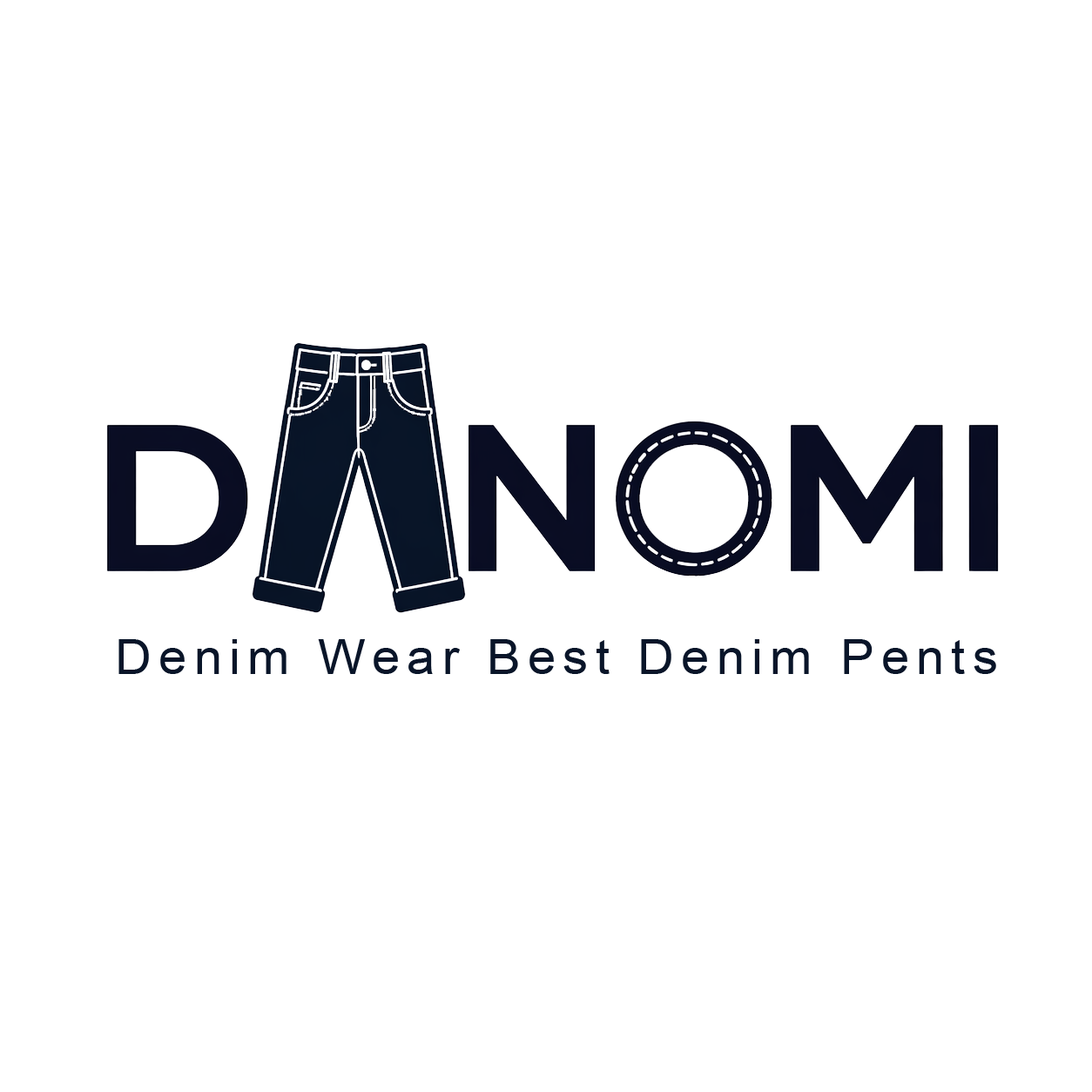
<style>
.page{position:relative;width:1092px;height:1092px;background:#ffffff}
.page>*{position:absolute;margin:0}
.t1{font:48.8px "ArialMT";letter-spacing:0.138em;color:#091529;scale:1.04 1}
</style>
<div class="page">
<p class="t1" style="left:118px;top:639px;width:878px;height:35px">Denim Wear Best Denim Pents</p>
</div>
